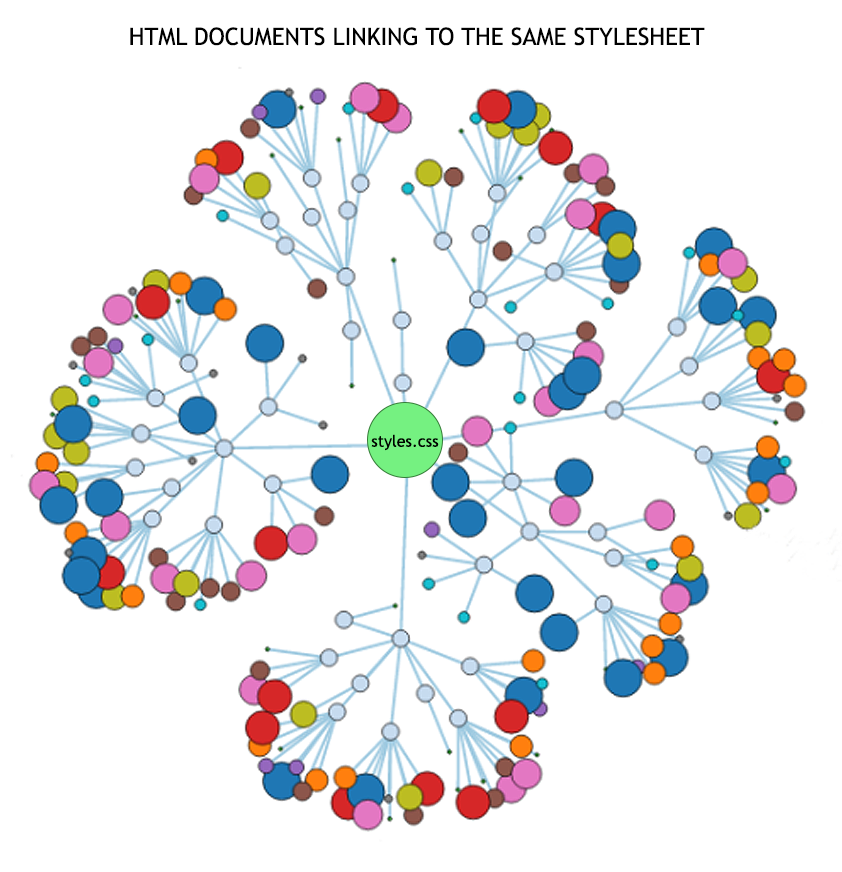
<style>
.page{position:relative;width:842px;height:872px;background:#ffffff}
.page>*{position:absolute;margin:0}
.t1{font:24px "TrebuchetMS";color:#000000;text-transform:uppercase}
.t2{font:16px "TrebuchetMS";color:#000000}
</style>
<div class="page">
<p class="t1" style="left:130px;top:27px;width:575px;height:19px">HTML documents linking to the same stylesheet</p>
<p class="t2" style="left:371px;top:434px;width:68px;height:17px">styles.css</p>
</div>
